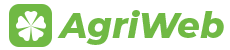
<style>
.page{position:relative;width:230px;height:50px;background:#ffffff}
.page>*{position:absolute;margin:0}
.t1{font:35px "Montserrat-ExtraBoldItalic";color:#70b944}
</style>
<div class="page">
<p class="t1" style="left:57px;top:10px;width:167px;height:35px">AgriWeb</p>
</div>
